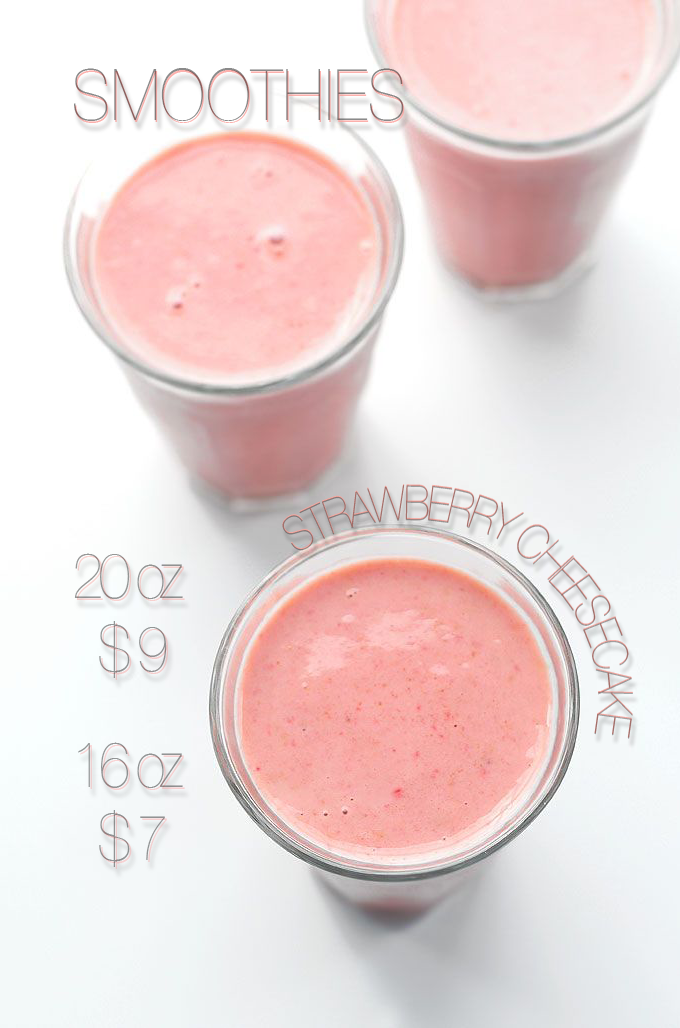
<style>
.page{position:relative;width:680px;height:1028px}
.page>*{position:absolute;margin:0}
.t1{font:71.4px "HelveticaNeue-UltraLight";letter-spacing:0.02em;color:#898686;text-transform:uppercase;scale:0.86 1}
.t2{font:71.4px "HelveticaNeue-UltraLight";letter-spacing:0.02em;color:#fdb2ad;text-transform:uppercase;scale:0.86 1}
.t3{font:48.2px/129.6px "HelveticaNeue-UltraLight";letter-spacing:-0.08em;text-transform:uppercase;scale:0.86 1}
.t4{font:64.4px "HelveticaNeue-UltraLight";letter-spacing:-0.08em;color:#939494;text-transform:uppercase;scale:0.86 1}
.t5{font:64.4px "HelveticaNeue-UltraLight";letter-spacing:-0.08em;color:#939494;scale:0.86 1}
.t6{font:64.4px "HelveticaNeue-UltraLight";letter-spacing:-0.08em;color:#f4cecc;text-transform:uppercase;scale:0.86 1}
.t7{font:64.4px "HelveticaNeue-UltraLight";letter-spacing:-0.08em;color:#f4cecc;scale:0.86 1}
.t8{font:64.4px "HelveticaNeue-UltraLight";letter-spacing:-0.08em;color:#939395;scale:0.86 1}
.t9{font:64.4px "HelveticaNeue-UltraLight";letter-spacing:-0.08em;color:#edc8c8;scale:0.86 1}
.t10{font:64.4px/129.6px "HelveticaNeue-UltraLight";letter-spacing:-0.08em;color:#929495;scale:0.86 1}
.t11{font:64.4px/129.6px "HelveticaNeue-UltraLight";letter-spacing:-0.08em;color:#929495;text-transform:uppercase;scale:0.86 1}
.t12{font:64.4px/129.6px "HelveticaNeue-UltraLight";letter-spacing:-0.08em;color:#f5cfd0;scale:0.86 1}
.t13{font:64.4px/129.6px "HelveticaNeue-UltraLight";letter-spacing:-0.08em;color:#f5cfd0;text-transform:uppercase;scale:0.86 1}
.t14{font:64.4px "HelveticaNeue-UltraLight";letter-spacing:-0.08em;color:#919394;scale:0.86 1}
.t15{font:64.4px "HelveticaNeue-UltraLight";letter-spacing:-0.08em;color:#eec9ca;scale:0.86 1}
</style>
<div class="page">
<p class="t1" style="left:74px;top:68px;width:330px;height:53px">Smoothies</p>
<p class="t2" style="left:75px;top:70px;width:330px;height:53px">Smoothies</p>
<p class="t3" style="left:282px;top:485px;width:351px;height:254px">Strawberry Cheesecake</p>
<p class="t4" style="left:74px;top:553px;width:109px;height:46px">20<span class="t5"> oz</span></p>
<p class="t6" style="left:76px;top:555px;width:109px;height:46px">20<span class="t7"> oz</span></p>
<p class="t8" style="left:99px;top:621px;width:68px;height:57px">$ 9</p>
<p class="t9" style="left:101px;top:623px;width:68px;height:57px">$ 9</p>
<p class="t10" style="left:78px;top:742px;width:105px;height:46px"><span class="t11">16 </span>oz   <br> oz</p>
<p class="t12" style="left:80px;top:744px;width:105px;height:46px"><span class="t13">16 </span>oz   <br> oz</p>
<p class="t14" style="left:99px;top:810px;width:66px;height:57px">$ 7</p>
<p class="t15" style="left:101px;top:812px;width:66px;height:57px">$ 7</p>
</div>
